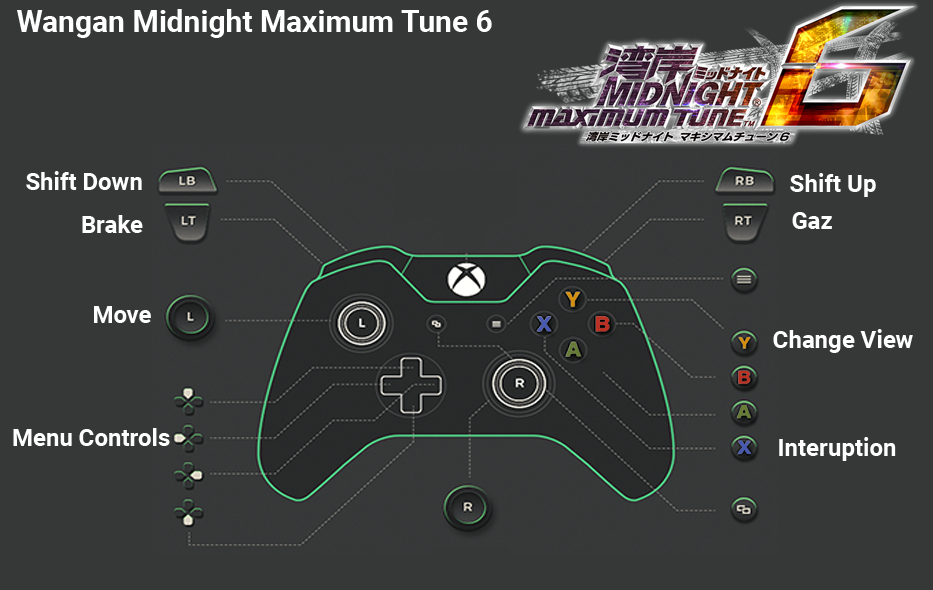
<style>
.page{position:relative;width:933px;height:590px;background:#363838}
.page>*{position:absolute;margin:0}
.t1{font:30px "Roboto-Bold";color:#ffffff}
.t2{font:24px "Roboto-Bold";color:#ffffff}
</style>
<div class="page">
<p class="t1" style="left:17px;top:9px;width:475px;height:29px">Wangan Midnight Maximum Tune 6</p>
<p class="t2" style="left:26px;top:171px;width:116px;height:19px">Shift Down</p>
<p class="t2" style="left:790px;top:173px;width:86px;height:24px">Shift Up</p>
<p class="t2" style="left:82px;top:215px;width:61px;height:18px">Brake</p>
<p class="t2" style="left:792px;top:212px;width:40px;height:17px">Gaz</p>
<p class="t2" style="left:94px;top:306px;width:57px;height:17px">Move</p>
<p class="t2" style="left:773px;top:329px;width:140px;height:24px">Change View</p>
<p class="t2" style="left:13px;top:428px;width:157px;height:18px">Menu Controls</p>
<p class="t2" style="left:779px;top:437px;width:117px;height:24px">Interuption</p>
</div>
